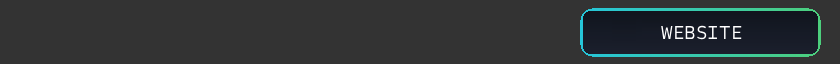
<style>
.page{position:relative;width:840px;height:64px;background:#333333}
.page>*{position:absolute;margin:0}
.t1{font:20px "SometypeMono-Regular";color:#ffffff}
</style>
<div class="page">
<p class="t1" style="left:661px;top:25px;width:81px;height:15px">WEBSITE</p>
</div>
